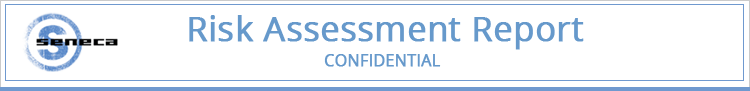
<style>
.page{position:relative;width:750px;height:91px;background:#ffffff}
.page>*{position:absolute;margin:0}
.t1{font:34px "OpenSans";color:#6699cc;font-weight:bold}
.t2{font:16px "OpenSans";letter-spacing:-0.003em;color:#6699cc;font-weight:bold}
</style>
<div class="page">
<p class="t1" style="left:189px;top:15px;width:395px;height:35px">Risk Assessment Report</p>
<p class="t2" style="left:324px;top:54px;width:117px;height:13px">CONFIDENTIAL</p>
</div>
